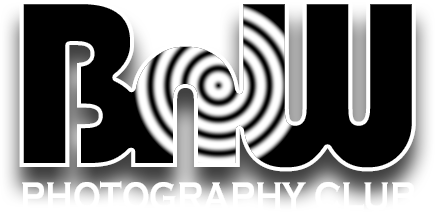
<style>
.page{position:relative;width:435px;height:212px;background:#000000}
.page>*{position:absolute;margin:0}
.t1{font:250px "Bauhaus93";letter-spacing:-0.11em}
.t2{font:41.1px "CopperplateGothic-Bold";color:#ffffff;text-transform:uppercase;scale:0.79 1}
</style>
<div class="page">
<p class="t1" style="left:19px;top:0px;width:397px;height:172px">BnW</p>
<p class="t2" style="left:22px;top:181px;width:393px;height:31px">Photography club</p>
</div>
